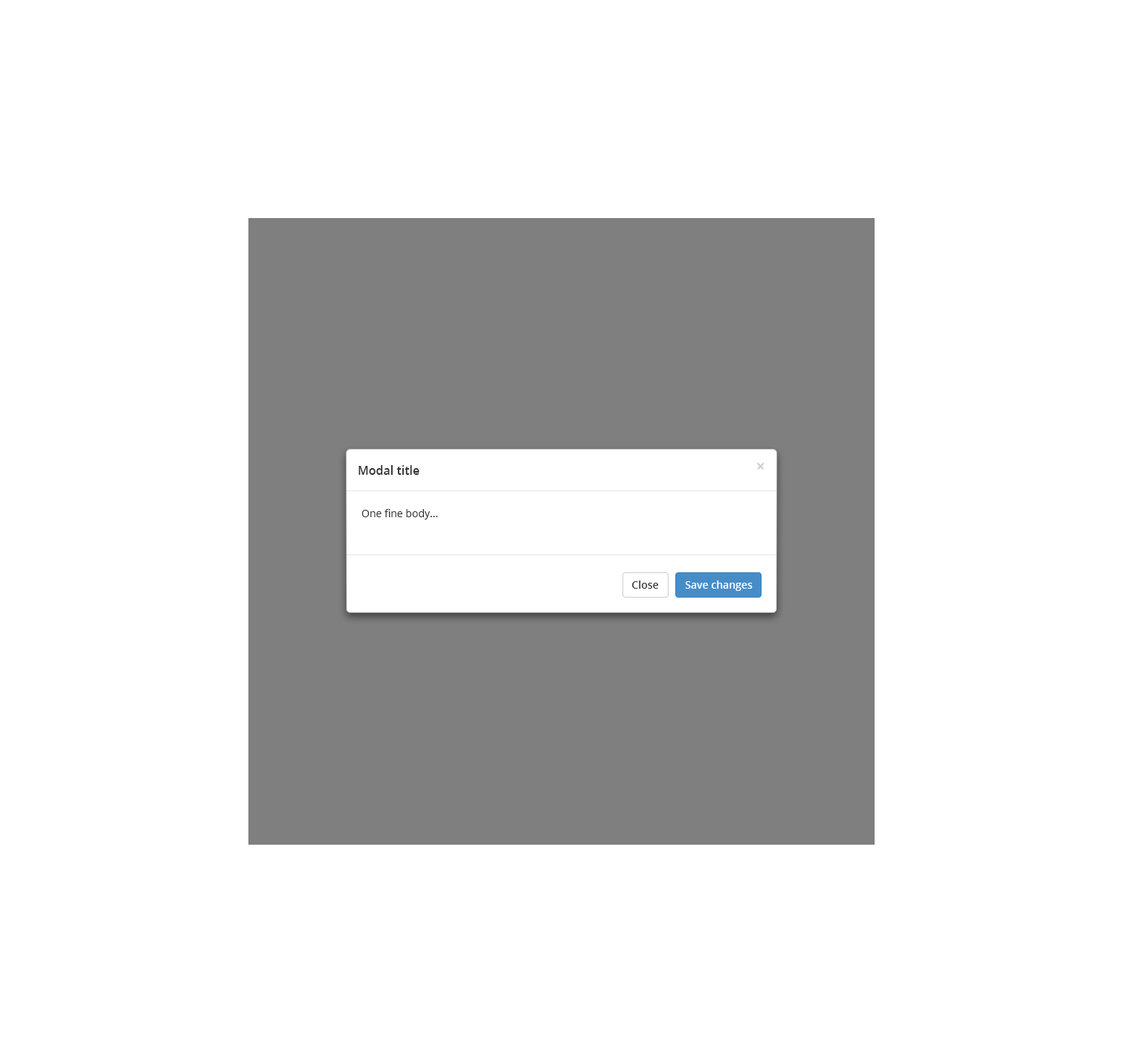
<style>
.page{position:relative;width:1123px;height:1062px;background:#ffffff}
.page>*{position:absolute;margin:0}
.t1{font:11.9px "OpenSans-Semibold";color:#333333}
.t2{font:10.4px "OpenSans";color:#333333}
.t3{font:10.4px "OpenSans-Semibold";color:#333333}
.t4{font:10.4px "OpenSans-Semibold";color:#ffffff}
</style>
<div class="page">
<p class="t1" style="left:359px;top:465px;width:61px;height:10px">Modal title</p>
<p class="t2" style="left:362px;top:509px;width:76px;height:10px">One fine body...</p>
<p class="t3" style="left:632px;top:580px;width:26px;height:8px">Close</p>
<p class="t4" style="left:685px;top:580px;width:68px;height:11px">Save changes</p>
</div>
